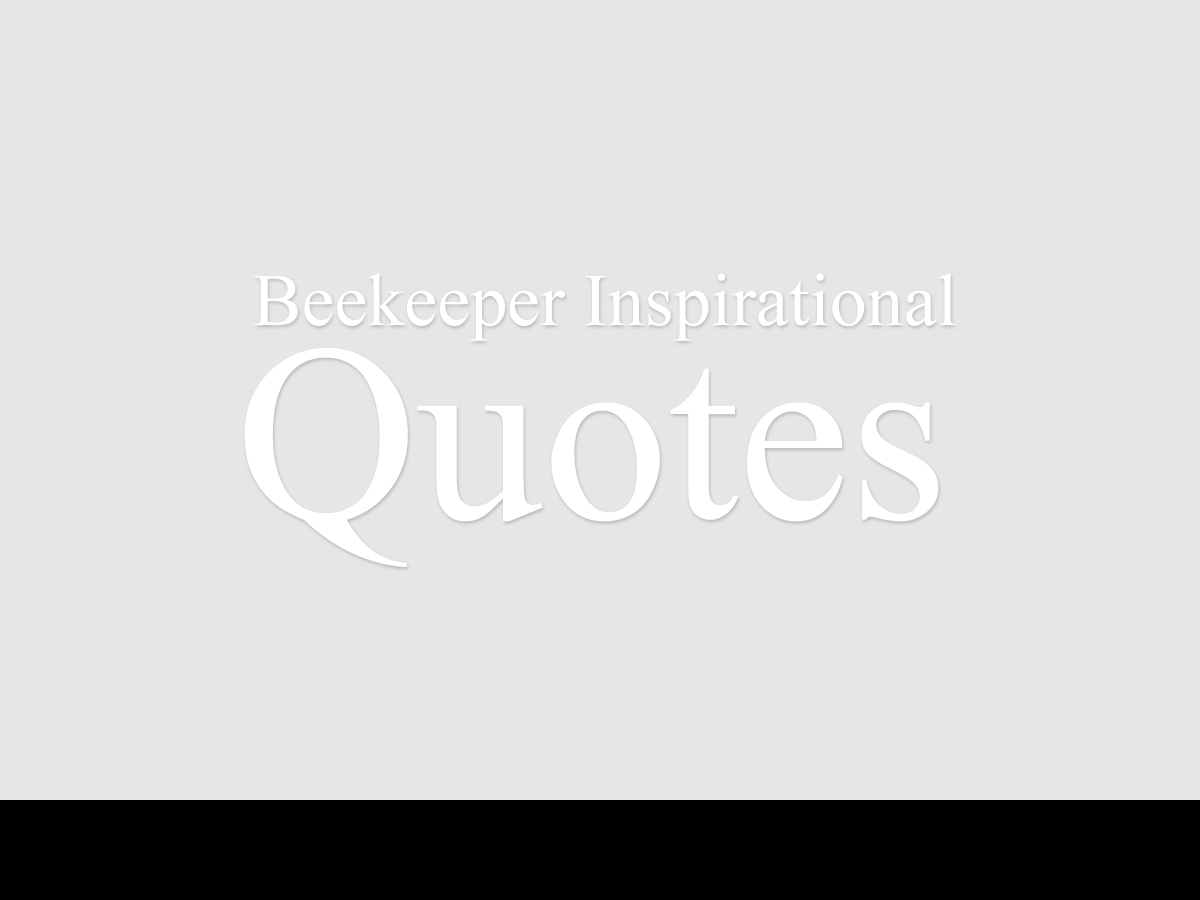
<style>
.page{position:relative;width:1200px;height:900px;background:#e6e6e6}
.page>*{position:absolute;margin:0}
.t1{font:74px "TimesNewRomanPSMT";color:#ffffff}
.t2{font:251px "TimesNewRomanPSMT";color:#ffffff}
</style>
<div class="page">
<p class="t1" style="left:253px;top:273px;width:703px;height:68px">Beekeeper Inspirational</p>
<p class="t2" style="left:244px;top:348px;width:695px;height:219px">Quotes</p>
</div>
